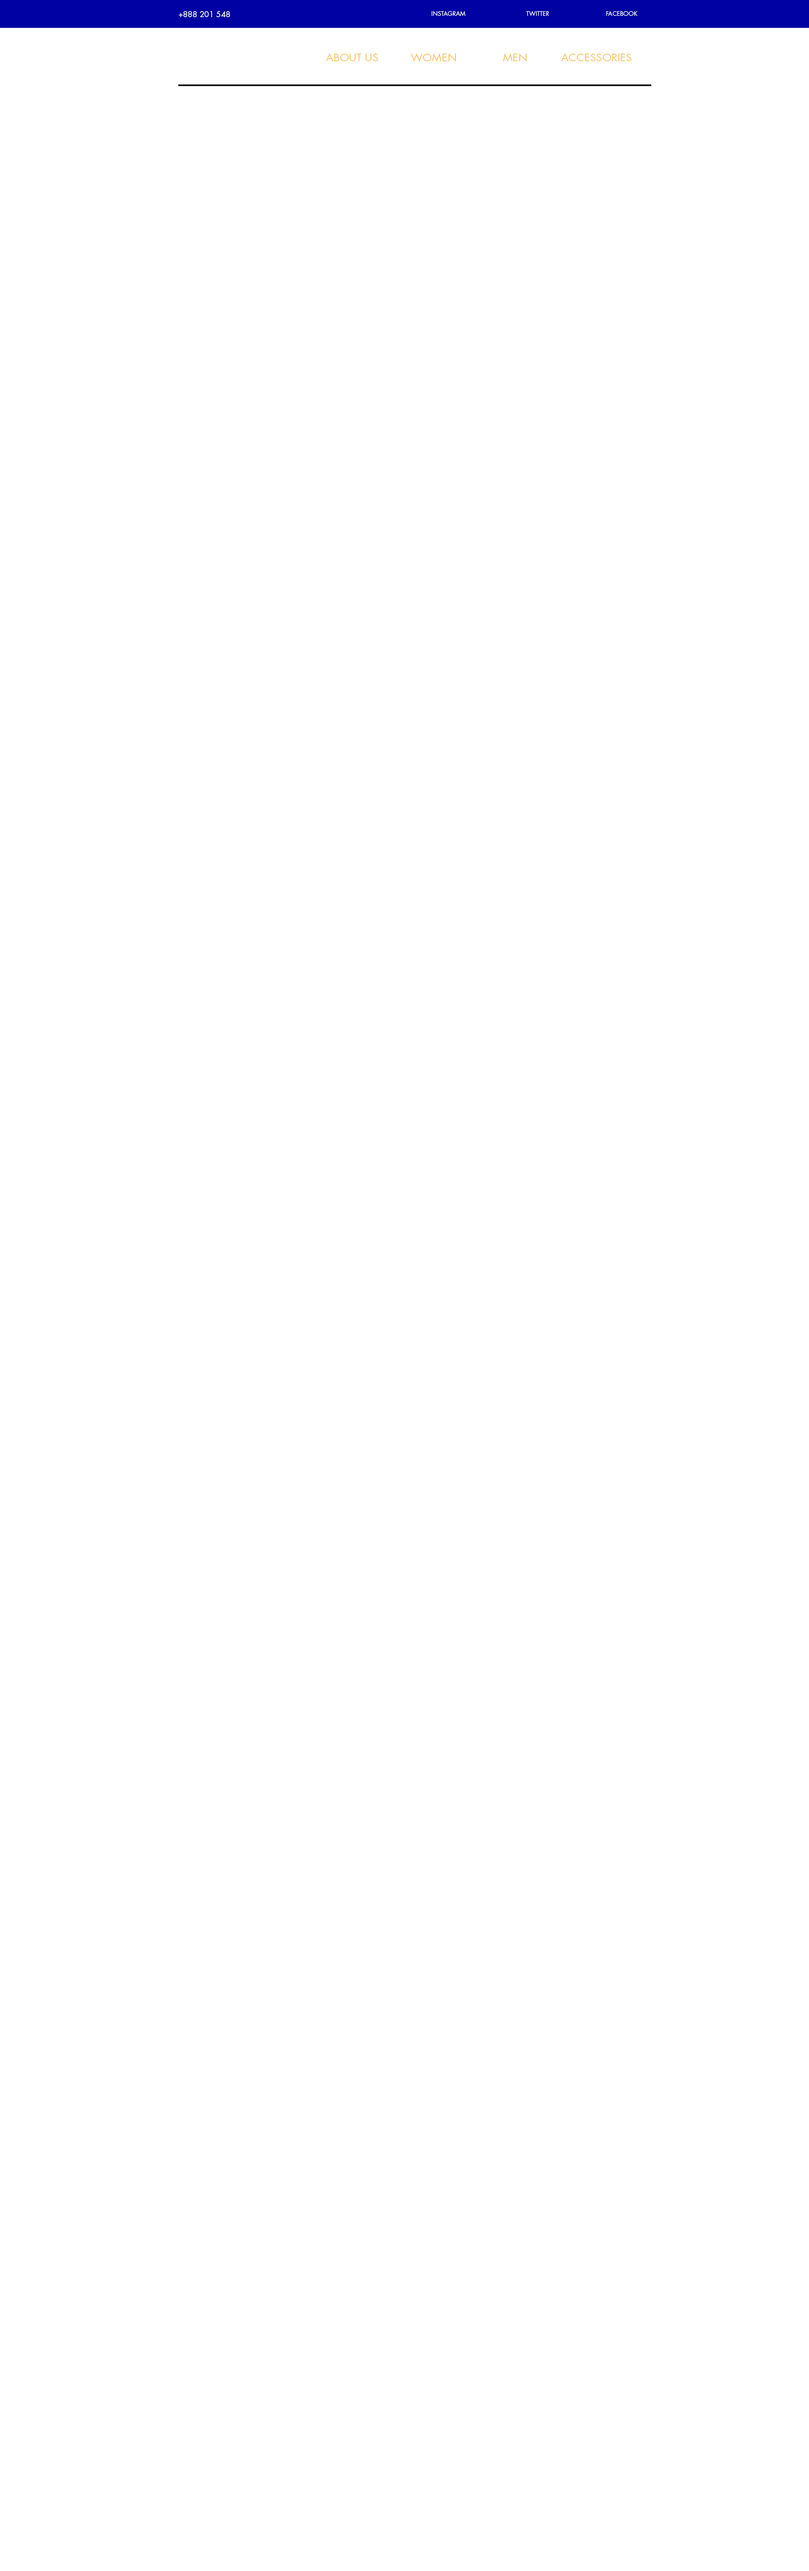
<style>
.page{position:relative;width:809px;height:2571px;background:#ffffff}
.page>*{position:absolute;margin:0}
.t1{font:7.7px "FuturaStd-Book";color:#fefefe}
.t2{font:6px "FuturaStd-Book";color:#fffefe}
.t3{font:10.3px "FuturaStd-Book";color:#f7c670;scale:1.06 1}
</style>
<div class="page">
<p class="t1" style="left:179px;top:11px;width:51px;height:6px">+888 201 548</p>
<p class="t2" style="left:432px;top:11px;width:33px;height:5px">INSTAGRAM</p>
<p class="t2" style="left:526px;top:11px;width:23px;height:5px">TWITTER</p>
<p class="t2" style="left:606px;top:11px;width:32px;height:5px">FACEBOOK</p>
<p class="t3" style="left:326px;top:53px;width:52px;height:8px">ABOUT US</p>
<p class="t3" style="left:411px;top:53px;width:45px;height:9px">WOMEN</p>
<p class="t3" style="left:503px;top:53px;width:24px;height:9px">MEN</p>
<p class="t3" style="left:561px;top:53px;width:71px;height:8px">ACCESSORIES</p>
</div>
